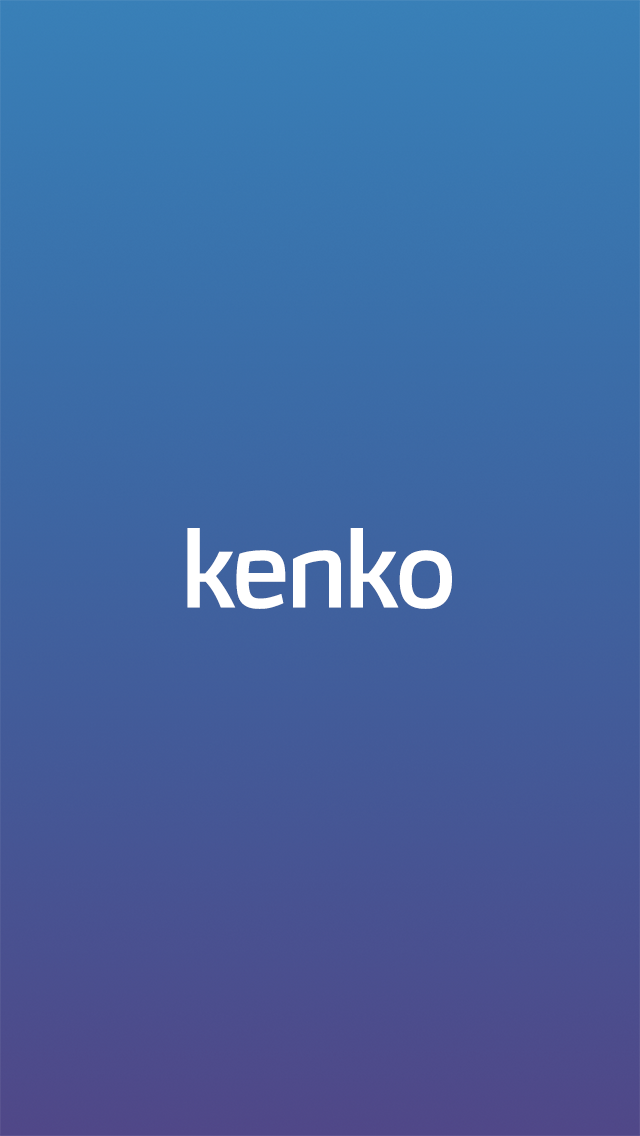
<style>
.page{position:relative;width:640px;height:1136px}
.page>*{position:absolute;margin:0}
.t1{font:100px "Hybrea";color:#ffffff}
</style>
<div class="page">
<p class="t1" style="left:187px;top:528px;width:265px;height:81px">kenko</p>
</div>
